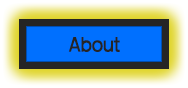
<style>
.page{position:relative;width:188px;height:88px;background:#0070ff}
.page>*{position:absolute;margin:0}
.t1{font:22.5px "Arctik3";color:#252525}
</style>
<div class="page">
<p class="t1" style="left:68px;top:37px;width:52px;height:15px">About</p>
</div>
